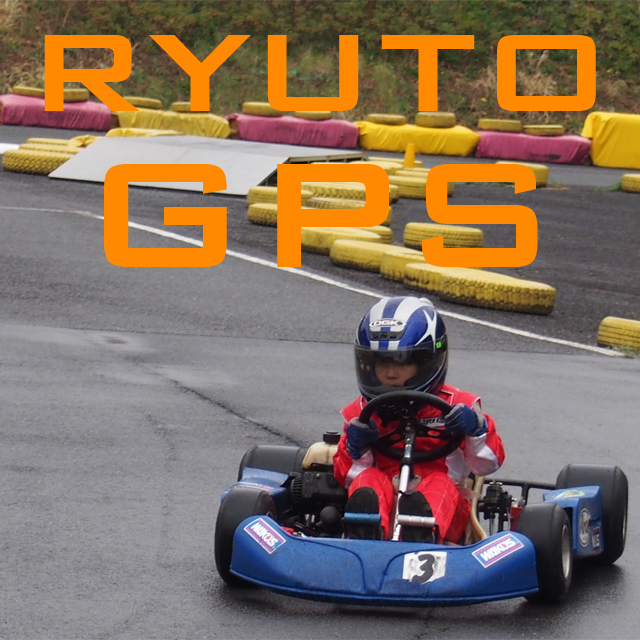
<style>
.page{position:relative;width:640px;height:640px}
.page>*{position:absolute;margin:0}
.t1{font:180px "BankGothic-Medium";color:#ff8a01}
.t2{font:200px "BankGothic-Medium";color:#ff8a01}
</style>
<div class="page">
<p class="t1" style="left:44px;top:35px;width:552px;height:76px">ryuto</p>
<p class="t2" style="left:104px;top:164px;width:434px;height:103px">GPS</p>
</div>
